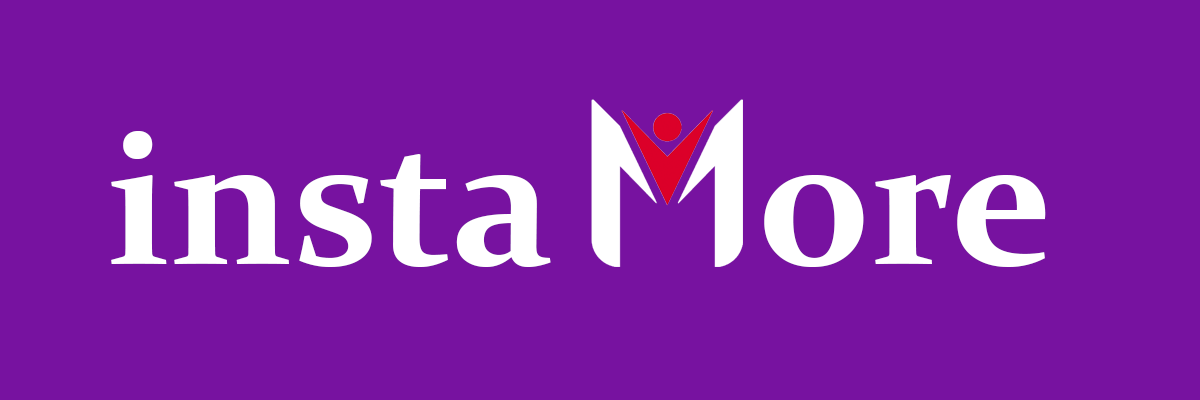
<style>
.page{position:relative;width:1200px;height:400px;background:#7712a0}
.page>*{position:absolute;margin:0}
.t1{font:190px "Constantia-Bold";color:#ffffff}
</style>
<div class="page">
<p class="t1" style="left:111px;top:130px;width:440px;height:137px">insta</p>
<p class="t1" style="left:764px;top:175px;width:282px;height:92px">ore</p>
</div>
